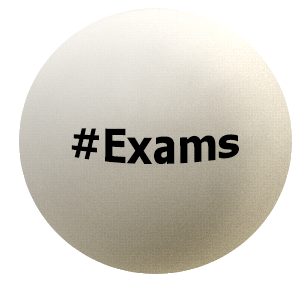
<style>
.page{position:relative;width:306px;height:290px;background:#ffffff}
.page>*{position:absolute;margin:0}
.t1{font:37.5px "Verdana-Bold";color:#000000}
</style>
<div class="page">
<p class="t1" style="left:71px;top:128px;width:168px;height:36px">#Exams</p>
</div>
